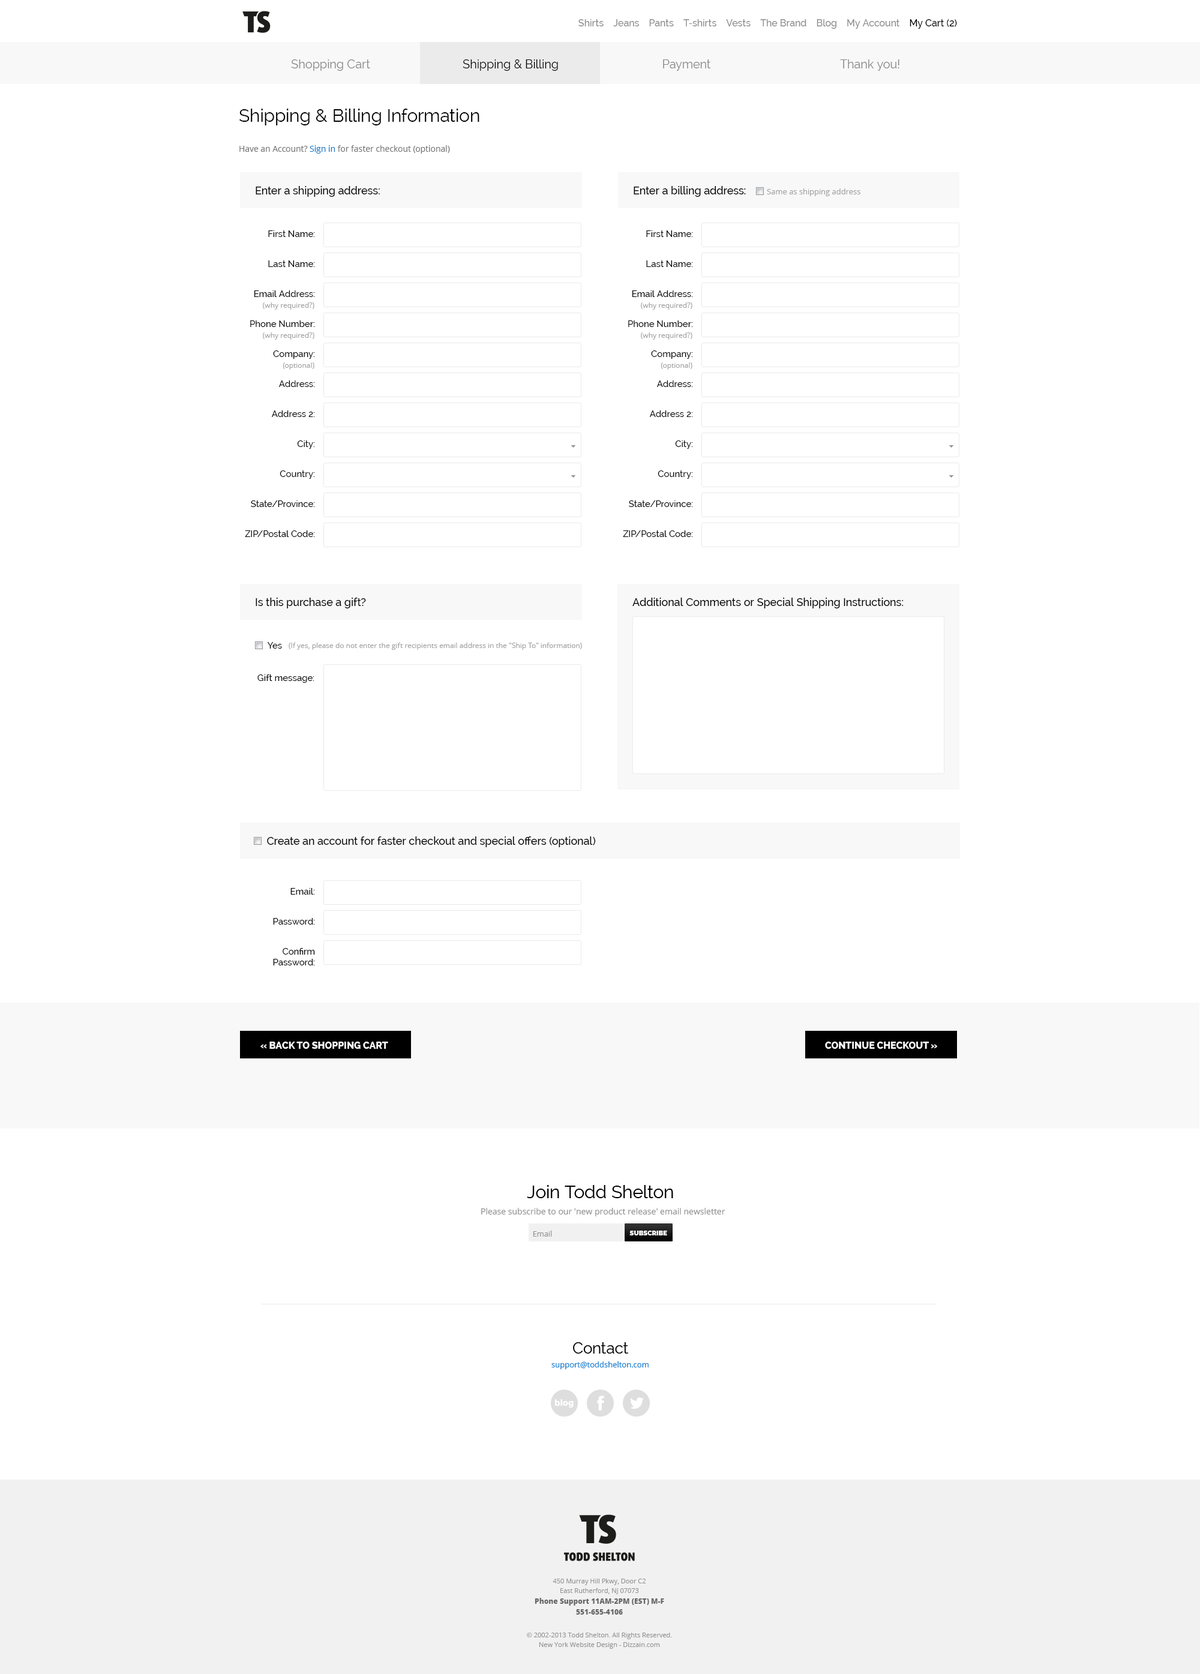
<style>
.page{position:relative;width:1200px;height:1674px;background:#ffffff}
.page>*{position:absolute;margin:0}
.t1{font:9.6px "Raleway-Medium";color:#8b8b8b}
.t2{font:9.6px "Raleway-Medium";color:#000000}
.t3{font:12px "Raleway";color:#878787}
.t4{font:12px "Raleway";color:#000000}
.t5{font:18px "Raleway";color:#000000}
.t6{font:8.4px "OpenSans";color:#757575}
.t7{font:8.4px "OpenSans";color:#1c7ccd}
.t8{font:10.8px "Raleway-Medium";color:#000000}
.t9{font:7.8px "OpenSans";color:#a3a3a3}
.t10{font:9px/30px "Raleway-Medium";color:#000000}
.t11{font:7.2px "OpenSans";color:#a3a3a3}
.t12{font:9px "Raleway-Medium";color:#000000}
.t13{font:9.6px "Raleway-ExtraBold";color:#ffffff;text-transform:uppercase}
</style>
<div class="page">
<p class="t1" style="left:578px;top:19px;width:379px;height:10px">Shirts    Jeans    Pants    T-shirts    Vests    The Brand    Blog    My Account    <span class="t2">My Cart (2)</span></p>
<p class="t3" style="left:291px;top:59px;width:79px;height:12px">Shopping Cart</p>
<p class="t4" style="left:463px;top:59px;width:95px;height:12px">Shipping &amp; Billing</p>
<p class="t3" style="left:663px;top:59px;width:48px;height:12px">Payment</p>
<p class="t3" style="left:840px;top:59px;width:59px;height:12px">Thank you!</p>
<p class="t5" style="left:239px;top:109px;width:240px;height:16px">Shipping &amp; Billing Information</p>
<p class="t6" style="left:239px;top:145px;width:211px;height:9px">Have an Account? <span class="t7">Sign in</span> for faster checkout (optional)</p>
<p class="t8" style="left:256px;top:186px;width:124px;height:11px">Enter a shipping address:</p>
<p class="t8" style="left:634px;top:186px;width:112px;height:11px">Enter a billing address:</p>
<p class="t9" style="left:767px;top:188px;width:93px;height:8px">Same as shipping address</p>
<p class="t10" style="left:245px;top:230px;width:70px;height:307px;text-align:right">First Name:<br>Last Name:<br>Email Address: <br>Phone Number: <br>Company:<br>Address:<br>Address 2:<br>City:<br>Country:<br>State/Province:<br>ZIP/Postal Code:</p>
<p class="t10" style="left:623px;top:230px;width:70px;height:307px;text-align:right">First Name:<br>Last Name:<br>Email Address: <br>Phone Number: <br>Company:<br>Address:<br>Address 2:<br>City:<br>Country:<br>State/Province:<br>ZIP/Postal Code:</p>
<p class="t11" style="left:263px;top:302px;width:51px;height:8px">(why required?)</p>
<p class="t11" style="left:641px;top:302px;width:51px;height:8px">(why required?)</p>
<p class="t11" style="left:263px;top:332px;width:51px;height:8px">(why required?)</p>
<p class="t11" style="left:641px;top:332px;width:51px;height:8px">(why required?)</p>
<p class="t11" style="left:283px;top:362px;width:31px;height:8px">(optional)</p>
<p class="t11" style="left:661px;top:362px;width:31px;height:8px">(optional)</p>
<p class="t8" style="left:256px;top:598px;width:110px;height:10px">Is this purchase a gift?</p>
<p class="t8" style="left:632px;top:598px;width:271px;height:10px">Additional Comments or Special Shipping Instructions:</p>
<p class="t12" style="left:267px;top:642px;width:15px;height:7px">Yes</p>
<p class="t11" style="left:289px;top:643px;width:293px;height:7px">(If yes, please do not enter the gift recipients email address in the "Ship To" information)</p>
<p class="t12" style="left:257px;top:674px;width:57px;height:9px">Gift message:</p>
<p class="t8" style="left:267px;top:836px;width:329px;height:11px">Create an account for faster checkout and special offers (optional)</p>
<p class="t10" style="left:273px;top:888px;width:42px;height:77px;text-align:right">Email:<br>Password:<br>Confirm <span class="t12">Password:</span></p>
<p class="t13" style="left:260px;top:1042px;width:128px;height:7px">« BACK TO SHOPPING CART</p>
<p class="t13" style="left:825px;top:1042px;width:112px;height:7px">Continue Checkout »</p>
</div>
